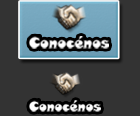
<style>
.page{position:relative;width:140px;height:116px;background:#333333}
.page>*{position:absolute;margin:0}
.t1{font:14.3px "SnapITC-Regular";color:#ffffff}
.t2{font:12.8px "SnapITC-Regular";color:#ffffff}
</style>
<div class="page">
<p class="t1" style="left:29px;top:36px;width:80px;height:13px">Conocénos</p>
<p class="t2" style="left:29px;top:100px;width:72px;height:12px">Conocénos</p>
</div>
